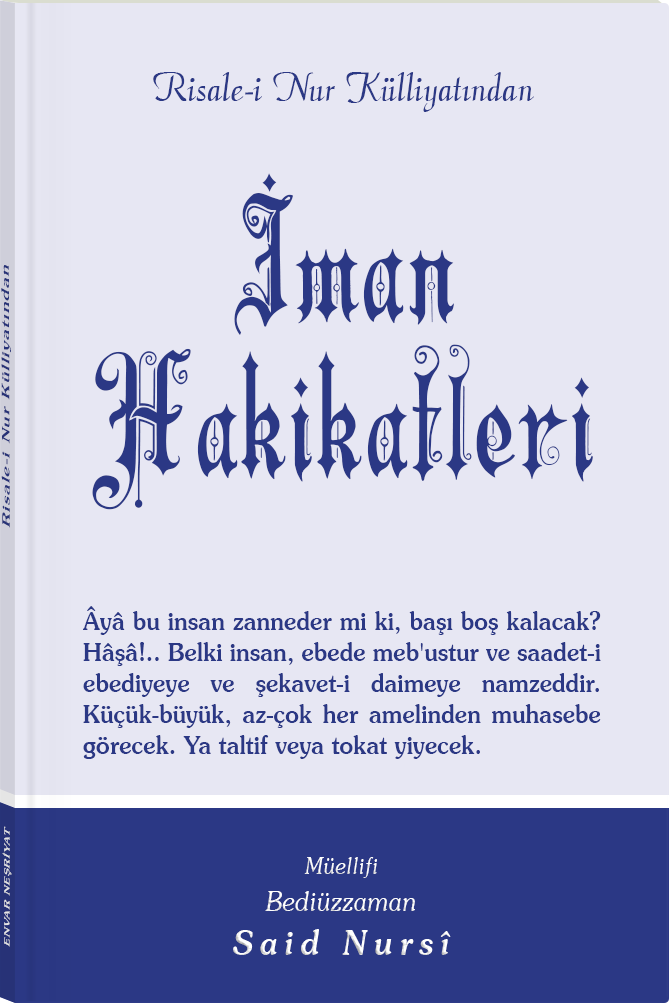
<style>
.page{position:relative;width:669px;height:1003px;background:#e7e7f3}
.page>*{position:absolute;margin:0}
.t1{font:45.3px "Barla © 072 Aria ScriptScriptSSi";color:#2b3885;scale:0.94 1}
.t2{font:166.3px/155.5px "Barla © 001 Liva Nur";letter-spacing:-0.001em;color:#2b3885;scale:0.92 1}
.t3{font:166.3px/148.4px "Barla © 001 Liva Nur";letter-spacing:-0.001em;color:#2b3885;scale:0.92 1}
.t4{font:11.4px "Souvenir-Medium";letter-spacing:0.08em;color:#2b3885;scale:1.65 1}
.t5{font:25.3px/31px "Souvenir-Medium";color:#2b3885;scale:0.92 1}
.t6{font:8.3px "Souvenir-Medium";letter-spacing:0.08em;color:#e5e5e5;scale:1.43 1}
.t7{font:27.1px/37.8px "Souvenir-LightItalic";color:#ffffff;scale:0.92 1}
.t8{font:22.8px/39.8px "Souvenir-LightItalic";color:#ffffff;scale:0.92 1}
.t9{font:33.9px/43.8px "Souvenir-MediumItalic";letter-spacing:0.2em;color:#ffffff;scale:0.92 1}
</style>
<div class="page">
<p class="t1" style="left:153px;top:72px;width:381px;height:40px">Risale-i Nur Külliyatından</p>
<p class="t2" style="left:92px;top:173px;width:501px;height:337px;text-align:center"><span class="t3">İman<br></span>Hakikatleri</p>
<p class="t4" style="left:1px;top:265px;width:10px;height:263px;rotate:-90deg">Risale-i Nur Külliyatından</p>
<p class="t5" style="left:83px;top:606px;width:518px;height:153px;text-align:justify">Âyâ bu insan zanneder mi ki, başı boş kalacak? Hâşâ!.. Belki insan, ebede meb'ustur ve saadet-i ebediyeye ve şekavet-i daimeye namzeddir. Küçük-büyük, az-çok her amelinden muhasebe görecek. Ya taltif veya tokat yiyecek.</p>
<p class="t6" style="left:2px;top:826px;width:10px;height:121px;rotate:-90deg">ENVAR NEŞRİYAT</p>
<p class="t7" style="left:233px;top:857px;width:218px;height:98px;text-align:center"><span class="t8">Müellifi<br></span>Bediüzzaman<br><span class="t9">Said Nursî</span></p>
</div>
